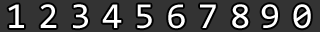
<style>
.page{position:relative;width:320px;height:32px;background:#333333}
.page>*{position:absolute;margin:0}
.t1{font:36.7px "Consolas";letter-spacing:0.01em;color:#ffffff}
</style>
<div class="page">
<p class="t1" style="left:8px;top:4px;width:16px;height:24px">1</p>
<p class="t1" style="left:40px;top:4px;width:17px;height:24px">2</p>
<p class="t1" style="left:73px;top:4px;width:15px;height:25px">3</p>
<p class="t1" style="left:102px;top:4px;width:20px;height:24px">4</p>
<p class="t1" style="left:137px;top:4px;width:15px;height:25px">5</p>
<p class="t1" style="left:168px;top:4px;width:17px;height:25px">6</p>
<p class="t1" style="left:200px;top:4px;width:16px;height:24px">7</p>
<p class="t1" style="left:232px;top:4px;width:17px;height:25px">8</p>
<p class="t1" style="left:261px;top:4px;width:17px;height:24px">9</p>
<p class="t1" style="left:293px;top:4px;width:18px;height:25px">0</p>
</div>
